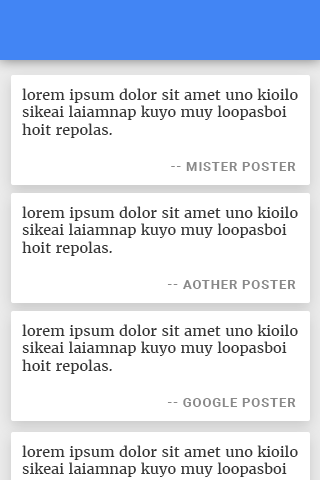
<style>
.page{position:relative;width:320px;height:480px;background:#ffffff}
.page>*{position:absolute;margin:0}
.t1{font:14.6px "Merriweather-Regular";color:#363636}
.t2{font:13.3px "Roboto-Bold";letter-spacing:0.05em;color:#898989}
</style>
<div class="page">
<p class="t1" style="left:22px;top:88px;width:276px;height:50px">lorem ipsum dolor sit amet uno kioilo sikeai laiamnap kuyo muy loopasboi hoit repolas.</p>
<p class="t2" style="left:171px;top:162px;width:125px;height:9px">-- MISTER POSTER</p>
<p class="t1" style="left:22px;top:206px;width:276px;height:50px">lorem ipsum dolor sit amet uno kioilo sikeai laiamnap kuyo muy loopasboi hoit repolas.</p>
<p class="t2" style="left:167px;top:280px;width:129px;height:9px">-- AOTHER POSTER</p>
<p class="t1" style="left:22px;top:324px;width:276px;height:50px">lorem ipsum dolor sit amet uno kioilo sikeai laiamnap kuyo muy loopasboi hoit repolas.</p>
<p class="t2" style="left:167px;top:398px;width:129px;height:9px">-- GOOGLE POSTER</p>
</div>
